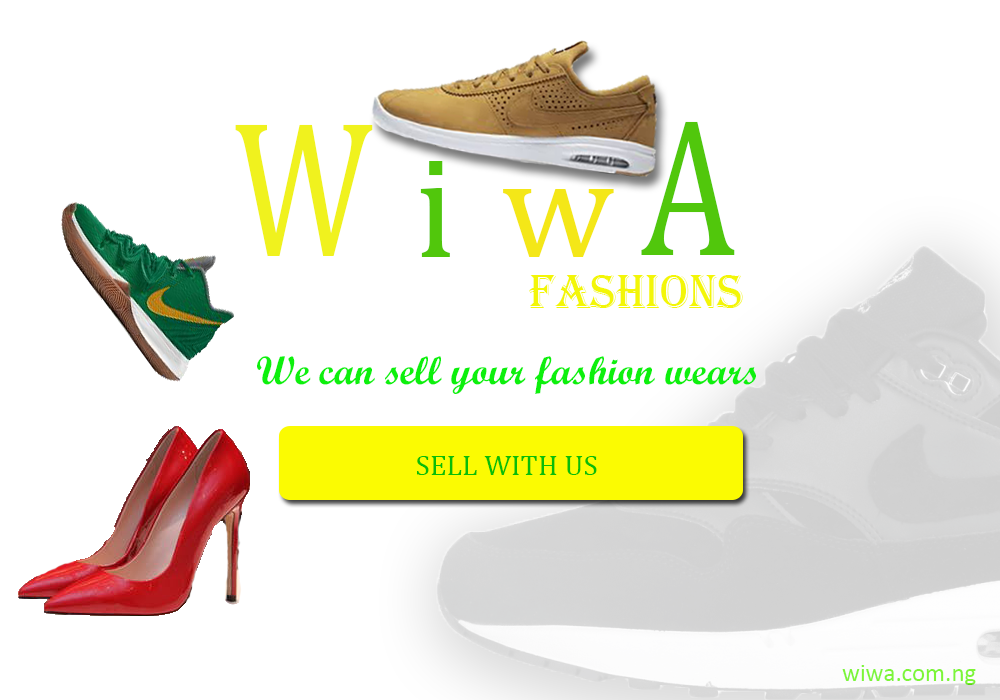
<style>
.page{position:relative;width:1000px;height:700px;background:#ffffff}
.page>*{position:absolute;margin:0}
.t1{font:197.4px "Cambria";color:#f0f21e;scale:0.76 1}
.t2{font:197.4px "Cambria";color:#51c70c;scale:0.77 1}
.t3{font:145.8px "Cambria";color:#51c70c}
.t4{font:145.8px "Cambria";color:#f4e718}
.t5{font:50.3px "Algerian";color:#f3f607;scale:0.93 1}
.t6{font:40px "ScriptMTBold";color:#0df00d}
.t7{font:29.2px "Cambria";color:#08be08}
.t8{font:25px "Calibri";color:#7ef536}
</style>
<div class="page">
<p class="t1" style="left:235px;top:124px;width:138px;height:132px">W</p>
<p class="t2" style="left:641px;top:121px;width:94px;height:134px">A</p>
<p class="t3" style="left:420px;top:161px;width:30px;height:96px">i</p>
<p class="t4" style="left:503px;top:189px;width:111px;height:68px">w</p>
<p class="t5" style="left:529px;top:275px;width:214px;height:33px">fashions</p>
<p class="t6" style="left:257px;top:356px;width:499px;height:38px">We can sell your fashion wears</p>
<p class="t7" style="left:417px;top:456px;width:180px;height:19px">SELL WITH US</p>
<p class="t8" style="left:842px;top:665px;width:134px;height:20px">wiwa.com.ng</p>
</div>
